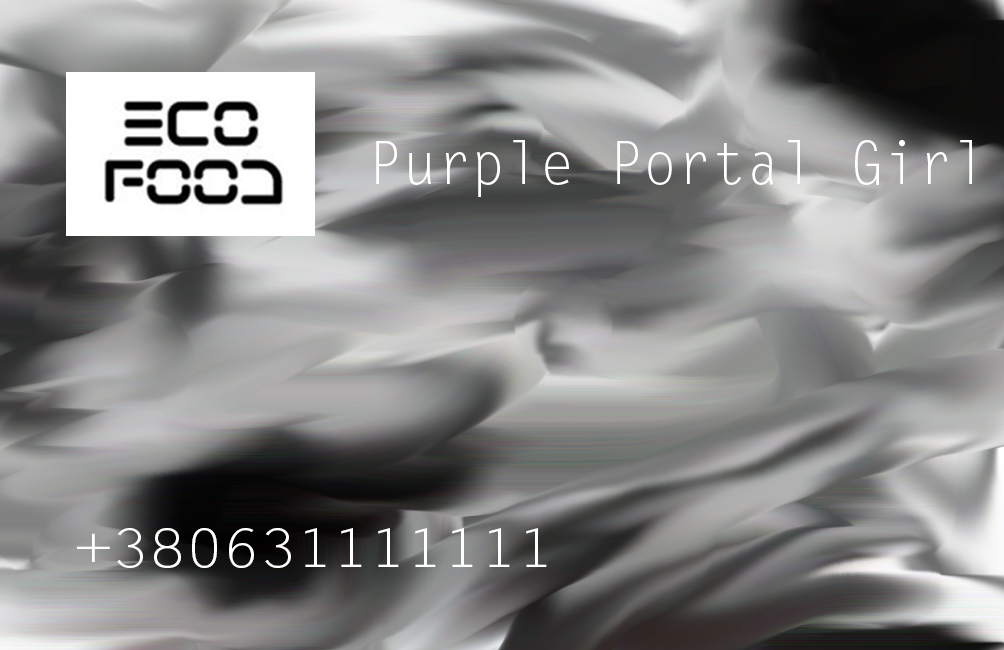
<style>
.page{position:relative;width:1004px;height:650px}
.page>*{position:absolute;margin:0}
.t1{font:59.2px "LetterGothicStd";color:#ffffff;scale:0.97 1}
.t2{font:53.1px "LetterGothicStd";color:#ffffff;scale:1.16 1}
</style>
<div class="page">
<p class="t1" style="left:376px;top:140px;width:596px;height:57px">Purple Portal Girl</p>
<p class="t2" style="left:77px;top:528px;width:470px;height:40px">+380631111111</p>
</div>
